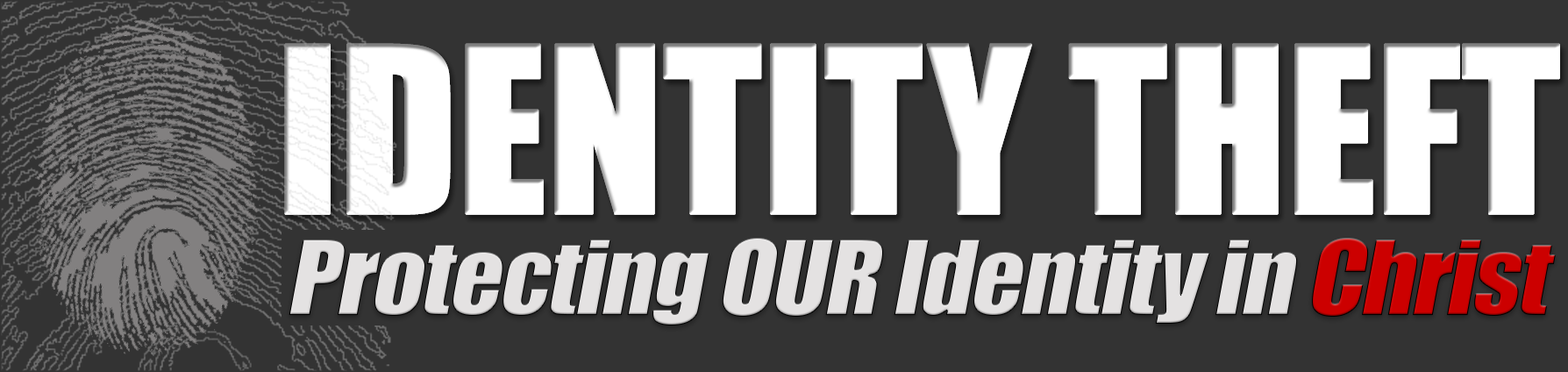
<style>
.page{position:relative;width:1568px;height:372px;background:#333333}
.page>*{position:absolute;margin:0}
.t1{font:95.6px "Impact";letter-spacing:-0.02em;color:#e4e2e2;font-style:italic;scale:1.06 1}
.t2{font:95.6px "Impact";letter-spacing:-0.02em;color:#cc0000;font-style:italic;scale:1.06 1}
</style>
<div class="page">
<p class="t1" style="left:289px;top:238px;width:1267px;height:87px">Protecting OUR Identity in <span class="t2">Christ</span></p>
</div>
